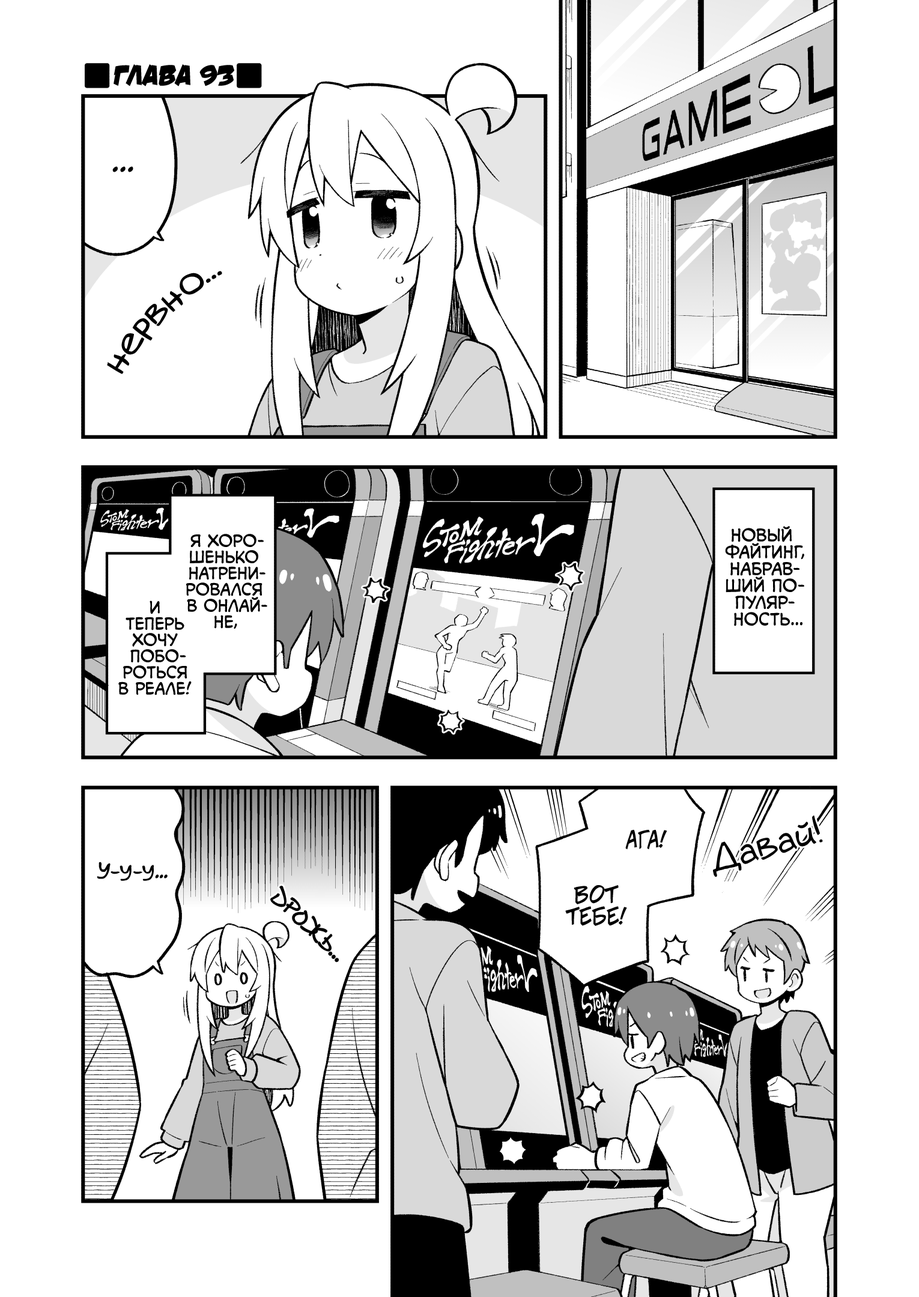
<style>
.page{position:relative;width:919px;height:1297px;background:#ffffff}
.page>*{position:absolute;margin:0}
.t1{font:28.8px "v_DamnNoisyKids";color:#000000;text-transform:uppercase}
.t2{font:28.8px "KuraiVoice2";color:#000000;text-transform:uppercase}
.t3{font:36px "v_Augie";color:#000000}
.t4{font:16.8px "v_CCMonologous";color:#000000;text-transform:uppercase}
.t5{font:16.2px "v_CCMonologous";color:#000000;text-transform:uppercase}
.t6{font:21.6px "v_CCJeffCampbell";color:#000000;text-transform:uppercase}
.t7{font:19.8px "AkbarPlain";color:#000000}
.t8{font:23.4px "DSNote";color:#000000;scale:0.9 1}
.t9{font:19.8px "DSNote";color:#000000;scale:0.9 1}
</style>
<div class="page">
<p class="t1" style="left:114px;top:64px;width:120px;height:22px">Глава 93</p>
<p class="t2" style="left:112px;top:166px;width:21px;height:6px">...</p>
<p class="t3" style="left:107px;top:271px;width:115px;height:103px;rotate:-45deg">нервно...</p>
<p class="t4" style="left:725px;top:526px;width:79px;height:101px;text-align:center">Новый<br>файтинг,<br>набрав-<br>ший по-<br>пуляр-<br>ность...</p>
<p class="t5" style="left:186px;top:534px;width:81px;height:95px;text-align:center">Я хоро-<br>шенько<br>натрени-<br>ровался<br>в онлай-<br>не,</p>
<p class="t5" style="left:118px;top:601px;width:74px;height:95px;text-align:center">и<br>теперь<br>хочу<br>побо-<br>роться<br>в реале!</p>
<p class="t3" style="left:713px;top:816px;width:110px;height:62px;rotate:-16deg">Давай!</p>
<p class="t6" style="left:625px;top:830px;width:42px;height:20px">Ага!</p>
<p class="t7" style="left:97px;top:862px;width:71px;height:19px">У-у-у...</p>
<p class="t8" style="left:271px;top:887px;width:67px;height:75px;rotate:44deg">дрожь<span class="t9">...</span></p>
<p class="t6" style="left:565px;top:885px;width:62px;height:41px;text-align:center">Вот<br>тебе!</p>
</div>
